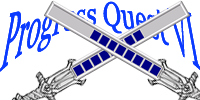
<style>
.page{position:relative;width:200px;height:100px;background:#ffffff}
.page>*{position:absolute;margin:0}
.t1{font:84.2px "Georgia";color:#0a39ff;scale:0.29 1}
</style>
<div class="page">
<p class="t1" style="left:0px;top:1px;width:202px;height:71px">Progress Quest VI</p>
<p class="t1" style="left:0px;top:1px;width:202px;height:71px">Progress Quest VI</p>
</div>
